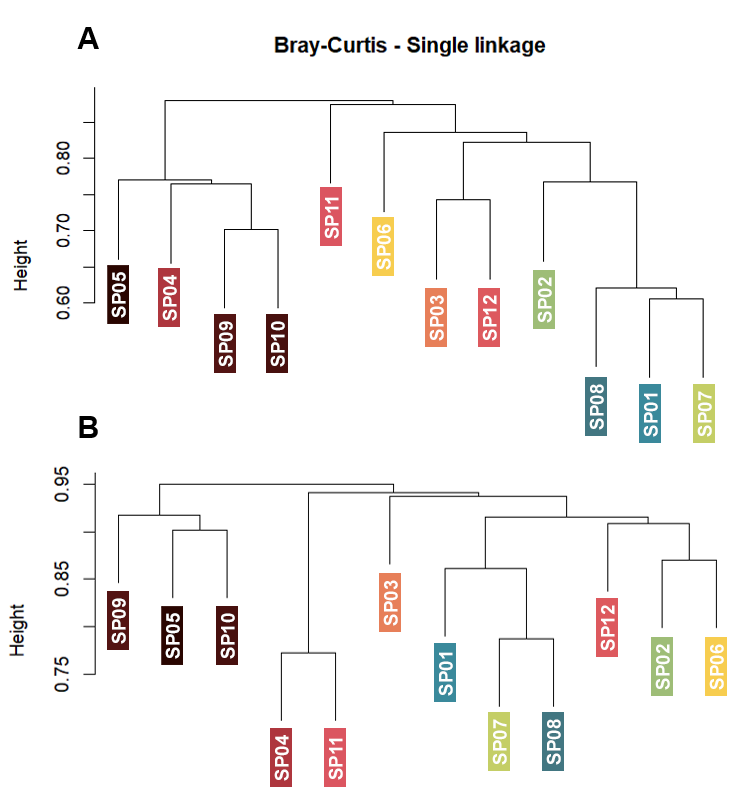
<style>
.page{position:relative;width:751px;height:787px;background:#ffffff}
.page>*{position:absolute;margin:0}
.t1{font:18.9px "Arial-BoldMT";color:#fefefe}
</style>
<div class="page">
<p class="t1" style="left:324px;top:197px;width:15px;height:42px;rotate:-90deg">SP11</p>
<p class="t1" style="left:376px;top:224px;width:15px;height:46px;rotate:-90deg">SP06</p>
<p class="t1" style="left:111px;top:272px;width:15px;height:46px;rotate:-90deg">SP05</p>
<p class="t1" style="left:162px;top:275px;width:15px;height:46px;rotate:-90deg">SP04</p>
<p class="t1" style="left:537px;top:277px;width:15px;height:46px;rotate:-90deg">SP02</p>
<p class="t1" style="left:429px;top:295px;width:15px;height:46px;rotate:-90deg">SP03</p>
<p class="t1" style="left:482px;top:295px;width:15px;height:46px;rotate:-90deg">SP12</p>
<p class="t1" style="left:218px;top:321px;width:15px;height:46px;rotate:-90deg">SP09</p>
<p class="t1" style="left:270px;top:321px;width:15px;height:46px;rotate:-90deg">SP10</p>
<p class="t1" style="left:589px;top:384px;width:15px;height:46px;rotate:-90deg">SP08</p>
<p class="t1" style="left:643px;top:393px;width:15px;height:44px;rotate:-90deg">SP01</p>
<p class="t1" style="left:697px;top:391px;width:15px;height:46px;rotate:-90deg">SP07</p>
<p class="t1" style="left:383px;top:580px;width:15px;height:46px;rotate:-90deg">SP03</p>
<p class="t1" style="left:111px;top:598px;width:15px;height:46px;rotate:-90deg">SP09</p>
<p class="t1" style="left:600px;top:605px;width:15px;height:46px;rotate:-90deg">SP12</p>
<p class="t1" style="left:165px;top:613px;width:15px;height:46px;rotate:-90deg">SP05</p>
<p class="t1" style="left:220px;top:613px;width:15px;height:46px;rotate:-90deg">SP10</p>
<p class="t1" style="left:438px;top:652px;width:15px;height:44px;rotate:-90deg">SP01</p>
<p class="t1" style="left:655px;top:644px;width:15px;height:46px;rotate:-90deg">SP02</p>
<p class="t1" style="left:709px;top:644px;width:15px;height:46px;rotate:-90deg">SP06</p>
<p class="t1" style="left:492px;top:719px;width:15px;height:46px;rotate:-90deg">SP07</p>
<p class="t1" style="left:546px;top:719px;width:15px;height:46px;rotate:-90deg">SP08</p>
<p class="t1" style="left:274px;top:735px;width:15px;height:46px;rotate:-90deg">SP04</p>
<p class="t1" style="left:328px;top:738px;width:15px;height:42px;rotate:-90deg">SP11</p>
</div>
